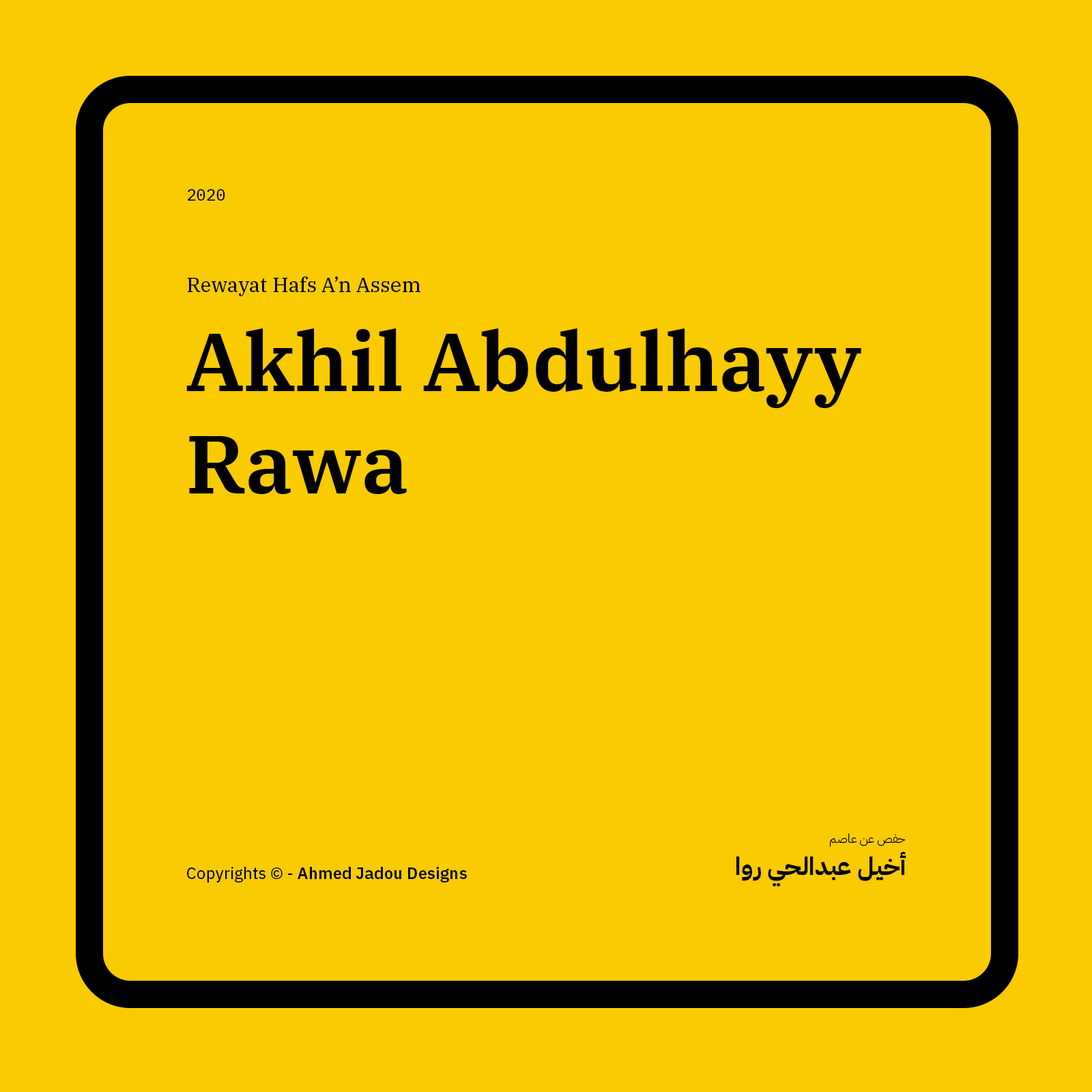
<style>
.page{position:relative;width:1092px;height:1092px;background:#facb00}
.page>*{position:absolute;margin:0}
.t1{font:16.4px "IBMPlexMono-Text";color:#000000}
.t2{font:20.5px "IBMPlexSerif-Text";color:#000000}
.t3{font:81.9px/102.7px "IBMPlexSerif-SemiBold";color:#000000}
.t4{font:12.3px "IBMPlexArabic-Light";color:#000000}
.t5{font:24.6px "IBMPlexArabic-Bold";color:#000000}
.t6{font:16.4px "IBMPlexSans-SemiBold";color:#000000}
.t7{font:16.4px "IBMPlexSans-Text";color:#000000}
</style>
<div class="page">
<p class="t1" style="left:188px;top:189px;width:37px;height:12px">2020</p>
<p class="t2" style="left:187px;top:276px;width:233px;height:20px">Rewayat Hafs A’n Assem</p>
<p class="t3" style="left:186px;top:328px;width:675px;height:166px">Akhil Abdulhayy Rawa</p>
<p class="t4" style="left:830px;top:833px;width:76px;height:14px">حفص عن عاصم</p>
<p class="t5" style="left:736px;top:852px;width:170px;height:35px">أخيل عبدالحي روا</p>
<p class="t6" style="left:187px;top:867px;width:280px;height:15px"><span class="t7">Copyrights © - </span>Ahmed Jadou Designs</p>
</div>
